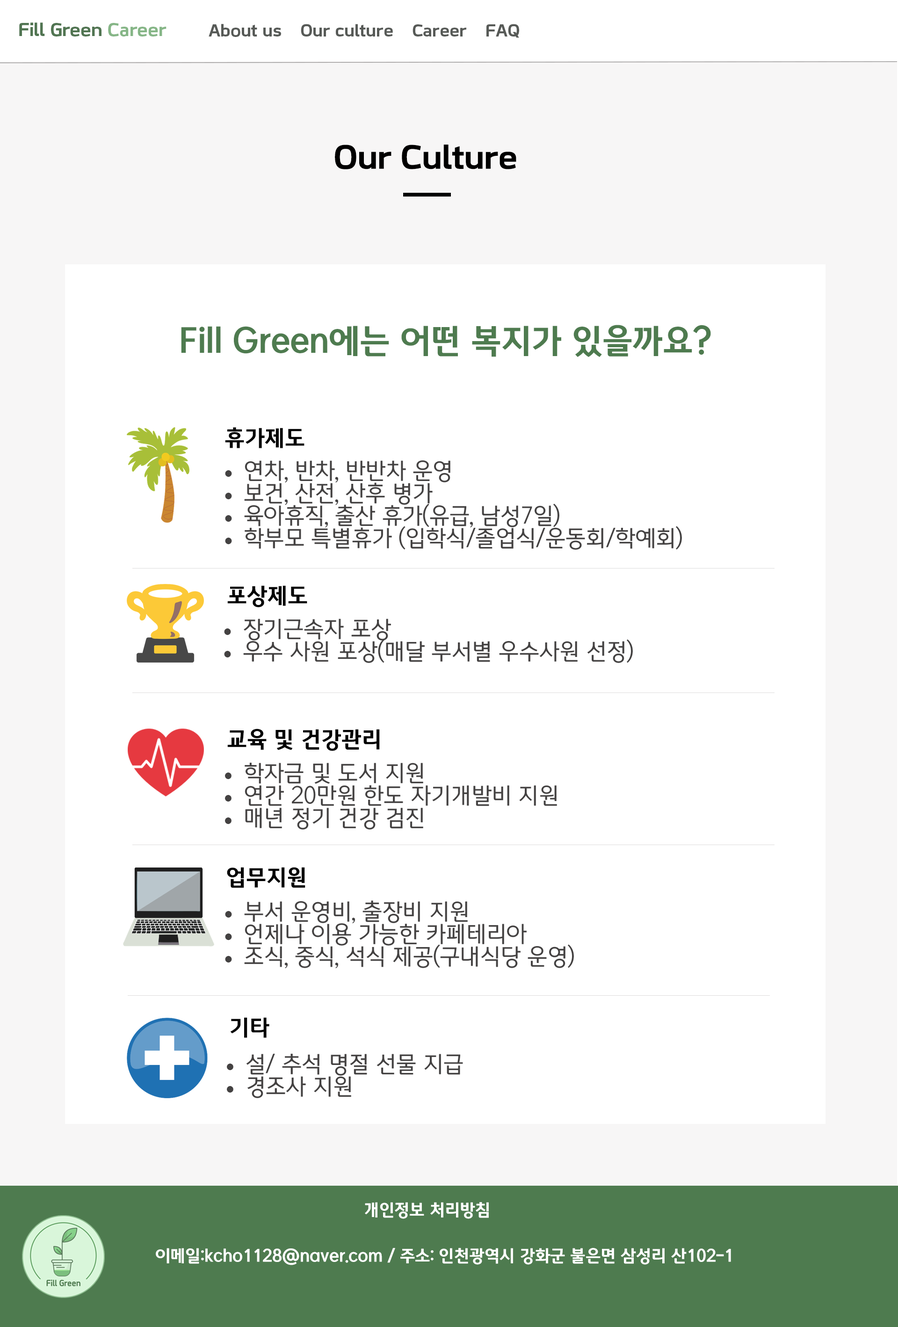
<style>
.page{position:relative;width:898px;height:1327px;background:#ffffff}
.page>*{position:absolute;margin:0}
.t1{font:18.7px "KOFIHDrLEEJWOTF-B";color:#517552}
.t2{font:18.7px "KOFIHDrLEEJWOTF-B";color:#86b687}
.t3{font:17.3px "KOFIHDrLEEJWOTF-B";color:#575a57}
.t4{font:33.7px "KOFIHDrLEEJWOTF-B";color:#000000}
.t5{font:33.7px "MICEGothicOTFBold";color:#4e7b4f}
.t6{font:22.5px "MICEGothicOTFBold";color:#010101}
.t7{font:22.5px/22.5px "MICEGothicOTF";color:#444242}
.t8{font:11.2px/22.5px "Wingdings-Regular";color:#444242}
.t9{font:22.5px "MICEGothicOTFBold";color:#000000}
.t10{font:16.8px "MICEGothicOTFBold";color:#ffffff}
</style>
<div class="page">
<p class="t1" style="left:19px;top:22px;width:148px;height:15px">Fill Green <span class="t2">Career</span></p>
<p class="t3" style="left:209px;top:24px;width:310px;height:14px">About us    Our culture    Career    FAQ</p>
<p class="t4" style="left:335px;top:145px;width:182px;height:24px">Our Culture</p>
<p class="t5" style="left:181px;top:325px;width:530px;height:32px">Fill Green에는 어떤 복지가 있을까요?</p>
<p class="t6" style="left:225px;top:427px;width:80px;height:21px">휴가제도</p>
<p class="t7" style="left:225px;top:460px;width:457px;height:90px"><span class="t8">l </span>연차, 반차, 반반차 운영<br><span class="t8">l </span>보건, 산전, 산후 병가<br><span class="t8">l </span>육아휴직, 출산 휴가(유급, 남성7일)<br><span class="t8">l </span>학부모 특별휴가 (입학식/졸업식/운동회/학예회)</p>
<p class="t9" style="left:227px;top:585px;width:80px;height:22px">포상제도</p>
<p class="t7" style="left:224px;top:619px;width:409px;height:44px"><span class="t8">l </span>장기근속자 포상<br><span class="t8">l </span>우수 사원 포상(매달 부서별 우수사원 선정)</p>
<p class="t9" style="left:227px;top:729px;width:153px;height:22px">교육 및 건강관리</p>
<p class="t7" style="left:225px;top:763px;width:332px;height:67px"><span class="t8">l </span>학자금 및 도서 지원<br><span class="t8">l </span>연간 20만원 한도 자기개발비 지원<br><span class="t8">l </span>매년 정기 건강 검진</p>
<p class="t9" style="left:227px;top:867px;width:79px;height:21px">업무지원</p>
<p class="t7" style="left:225px;top:900px;width:349px;height:69px"><span class="t8">l </span>부서 운영비, 출장비 지원<br><span class="t8">l </span>언제나 이용 가능한 카페테리아<br><span class="t8">l </span>조식, 중식, 석식 제공(구내식당 운영)</p>
<p class="t9" style="left:230px;top:1017px;width:40px;height:21px">기타</p>
<p class="t7" style="left:227px;top:1054px;width:236px;height:44px"><span class="t8">l </span>설/ 추석 명절 선물 지급<br><span class="t8">l </span>경조사 지원</p>
<p class="t10" style="left:365px;top:1202px;width:124px;height:17px">개인정보 처리방침</p>
<p class="t10" style="left:156px;top:1248px;width:575px;height:17px">이메일:kcho1128@naver.com / 주소: 인천광역시 강화군 불은면 삼성리 산102-1</p>
</div>
